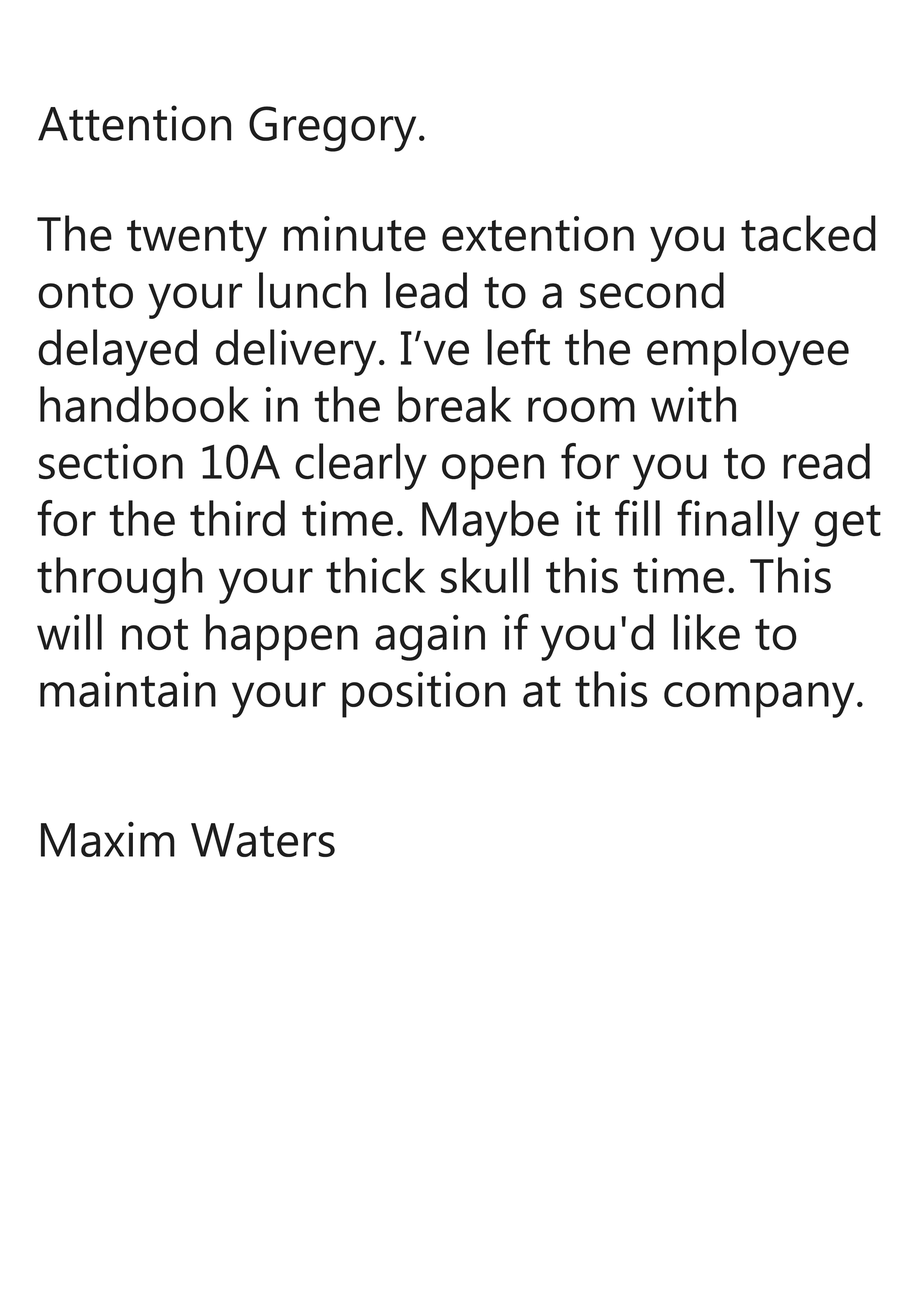
<style>
.page{position:relative;width:918px;height:1299px;background:#ffffff}
.page>*{position:absolute;margin:0}
.t1{font:47.5px "MicrosoftPhagsPa";color:#1f1f1f}
</style>
<div class="page">
<p class="t1" style="left:38px;top:106px;width:387px;height:46px">Attention Gregory.</p>
<p class="t1" style="left:37px;top:215px;width:844px;height:503px">The twenty minute extention you tacked<br>onto your lunch lead to a second<br>delayed delivery. I’ve left the employee<br>handbook in the break room with<br>section 10A clearly open for you to read<br>for the third time. Maybe it fill finally get<br>through your thick skull this time. This <br>will not happen again if you'd like to <br>maintain your position at this company.</p>
<p class="t1" style="left:41px;top:822px;width:294px;height:35px">Maxim Waters</p>
</div>
